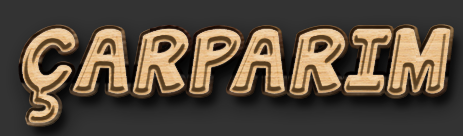
<style>
.page{position:relative;width:463px;height:136px;background:#333333}
.page>*{position:absolute;margin:0}
.t1{font:80px "JandaManateeSolid";letter-spacing:0.025em;font-style:italic}
</style>
<div class="page">
<p class="t1" style="left:22px;top:28px;width:428px;height:95px">ÇARPARIM</p>
<p class="t1" style="left:22px;top:28px;width:428px;height:95px">ÇARPARIM</p>
</div>
